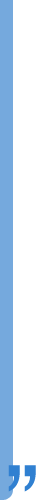
<style>
.page{position:relative;width:43px;height:500px;background:#ffffff}
.page>*{position:absolute;margin:0}
.t1{font:84.4px "GenevaCY";color:#3080d1}
</style>
<div class="page">
<p class="t1" style="left:8px;top:465px;width:28px;height:27px;rotate:180deg">“</p>
</div>
